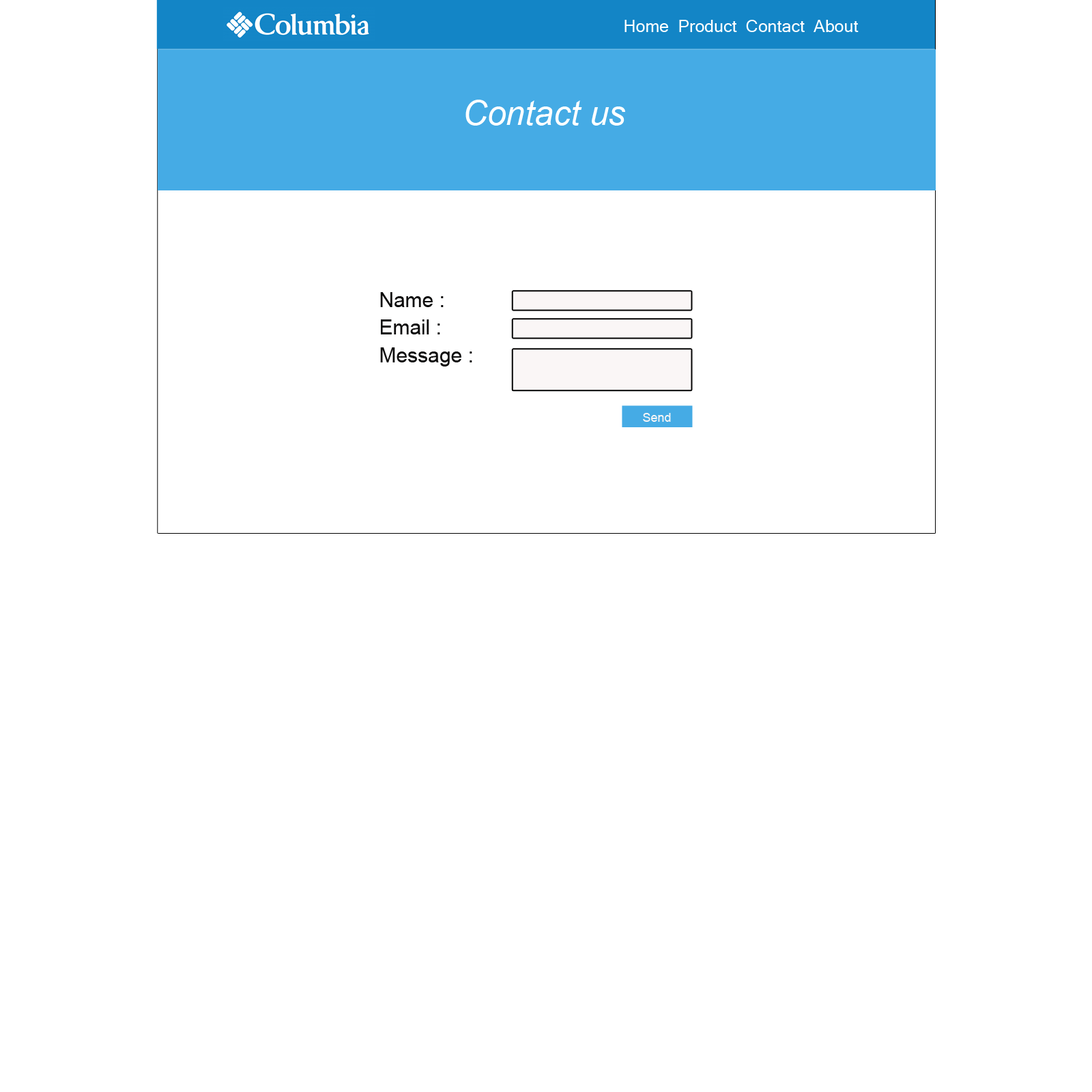
<style>
.page{position:relative;width:1092px;height:1092px;background:#ffffff}
.page>*{position:absolute;margin:0}
.t1{font:17.1px "MicrosoftSansSerif";color:#ffffff}
.t2{font:34.1px "Arial-ItalicMT";color:#ffffff}
.t3{font:20.5px "ArialMT";color:#0c0b0b}
.t4{font:12.3px "ArialMT";color:#faf6f6}
</style>
<div class="page">
<p class="t1" style="left:624px;top:20px;width:235px;height:12px">Home  Product  Contact  About</p>
<p class="t2" style="left:465px;top:100px;width:160px;height:26px">Contact us</p>
<p class="t3" style="left:380px;top:292px;width:64px;height:15px">Name :</p>
<p class="t3" style="left:381px;top:319px;width:59px;height:15px">Email :</p>
<p class="t3" style="left:380px;top:347px;width:92px;height:19px">Message :</p>
<p class="t4" style="left:643px;top:413px;width:28px;height:9px">Send</p>
</div>
